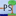
<style>
.page{position:relative;width:16px;height:16px}
.page>*{position:absolute;margin:0}
.t1{font:9px "TrebuchetMS";color:#465265}
</style>
<div class="page">
<p class="t1" style="left:3px;top:4px;width:9px;height:7px">PS</p>
</div>
